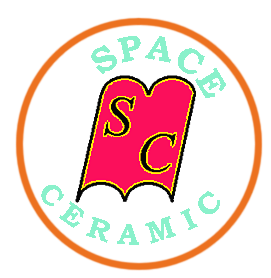
<style>
.page{position:relative;width:271px;height:278px;background:#ffffff}
.page>*{position:absolute;margin:0}
.t1{font:36px/22px "BookmanOldStyle-Bold";letter-spacing:0.01em;color:#8af1cb}
.t2{font:30px/22px "BookmanOldStyle";letter-spacing:0.01em;color:#040404}
.t3{font:30px/22px "BookmanOldStyle-Bold";letter-spacing:0.01em;color:#8af1cb}
</style>
<div class="page">
<p class="t1" style="left:91px;top:36px;width:135px;height:62px"><span class="t2">  </span>SPACE</p>
<p class="t3" style="left:41px;top:185px;width:179px;height:60px">C E R A M I C</p>
</div>
